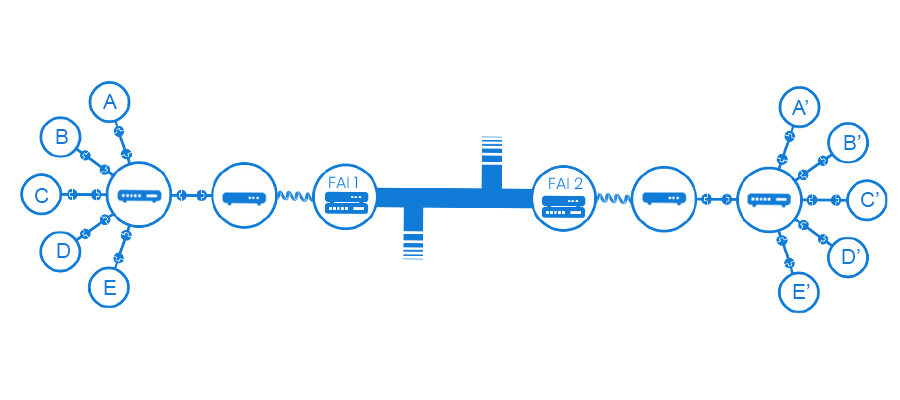
<style>
.page{position:relative;width:900px;height:400px;background:#ffffff}
.page>*{position:absolute;margin:0}
.t1{font:21px "ArialMT";color:#107cd7}
.t2{font:16px "Poppins-Light";color:#107cd7}
</style>
<div class="page">
<p class="t1" style="left:103px;top:94px;width:14px;height:15px">A</p>
<p class="t1" style="left:792px;top:100px;width:16px;height:15px">A’</p>
<p class="t1" style="left:56px;top:129px;width:12px;height:15px">B</p>
<p class="t1" style="left:844px;top:135px;width:17px;height:15px">B’</p>
<p class="t2" style="left:329px;top:176px;width:29px;height:13px">FAI 1</p>
<p class="t2" style="left:549px;top:177px;width:34px;height:13px">FAI 2</p>
<p class="t1" style="left:35px;top:188px;width:14px;height:15px">C</p>
<p class="t1" style="left:861px;top:192px;width:18px;height:15px">C’</p>
<p class="t1" style="left:57px;top:243px;width:14px;height:15px">D</p>
<p class="t1" style="left:842px;top:249px;width:18px;height:15px">D’</p>
<p class="t1" style="left:104px;top:280px;width:12px;height:15px">E</p>
<p class="t1" style="left:793px;top:284px;width:17px;height:15px">E’</p>
</div>
